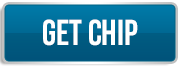
<style>
.page{position:relative;width:180px;height:66px}
.page>*{position:absolute;margin:0}
.t1{font:36px "UTM-Bebas";color:#ffffff}
</style>
<div class="page">
<p class="t1" style="left:43px;top:19px;width:95px;height:27px">get chip</p>
</div>
